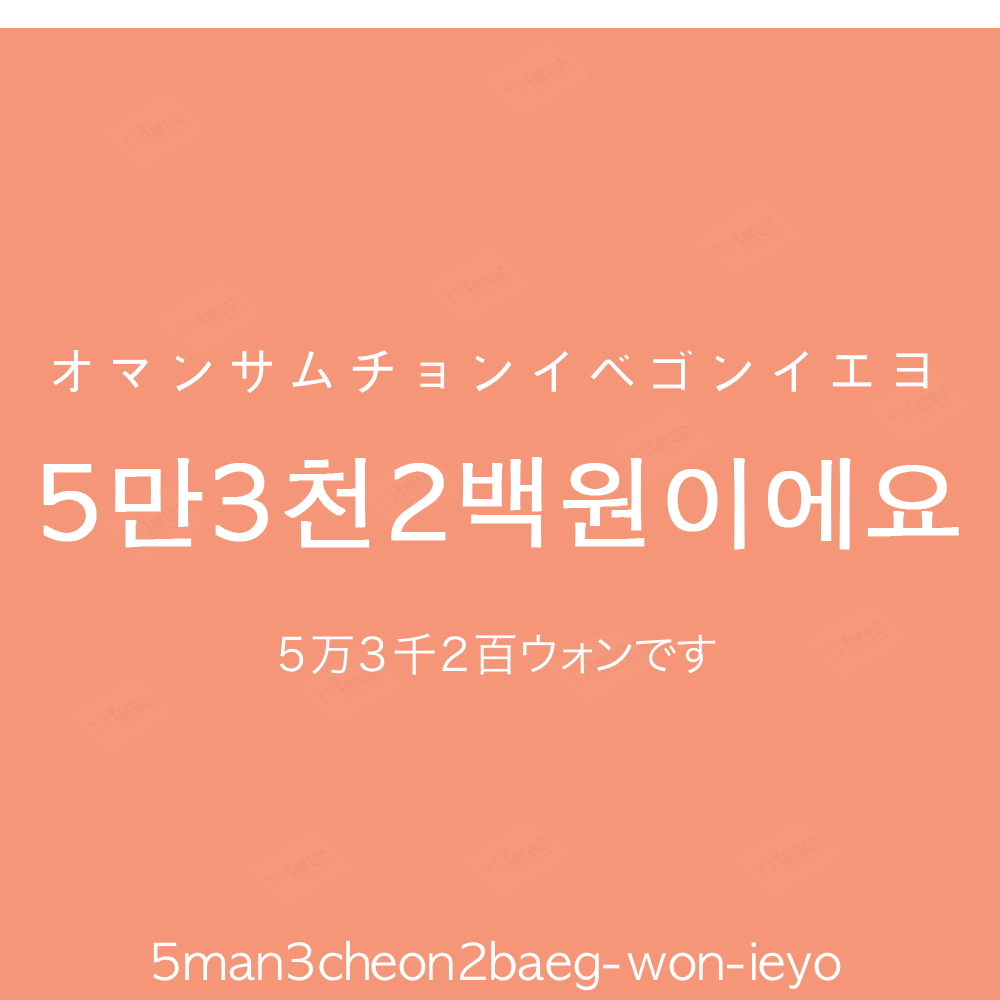
<style>
.page{position:relative;width:1000px;height:1000px;background:#f69679}
.page>*{position:absolute;margin:0}
.t1{font:60px "AppleGothic";color:#ffffff}
.t2{font:100px "AppleGothic";color:#ffffff;font-weight:bold}
.t3{font:45px "HiraKakuProN-W3";color:#ffffff}
.t4{font:50px "AppleGothic";color:#ffffff}
</style>
<div class="page">
<p class="t1" style="left:53px;top:349px;width:875px;height:45px">オマンサムチョンイベゴンイエヨ</p>
<p class="t2" style="left:43px;top:457px;width:916px;height:93px">5만3천2백원이에요</p>
<p class="t3" style="left:279px;top:633px;width:437px;height:42px">５万３千２百ウォンです</p>
<p class="t4" style="left:153px;top:940px;width:688px;height:51px">5man3cheon2baeg-won-ieyo</p>
</div>
